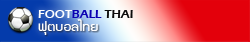
<style>
.page{position:relative;width:250px;height:42px;background:#e3000b}
.page>*{position:absolute;margin:0}
.t1{font:12px "ErasITC-Demi";color:#ffffff}
.t2{font:12px "ErasITC-Demi";color:#0a00b2}
.t3{font:12px "ErasITC-Demi";color:#0c0c0c}
.t4{font:14.4px "supermarket";color:#ffffff;scale:1.11 1}
.t5{font:14.2px "supermarket";color:#ffffff;scale:1.12 1}
</style>
<div class="page">
<p class="t1" style="left:38px;top:10px;width:95px;height:8px">FOOT<span class="t2">BALL </span><span class="t3">THAI</span></p>
<p class="t4" style="left:38px;top:19px;width:60px;height:16px"><span class="t5">ฟุ</span>ตบอลไทย</p>
</div>
